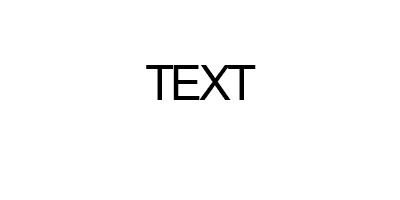
<style>
.page{position:relative;width:400px;height:200px;background:#ffffff}
.page>*{position:absolute;margin:0}
.t1{font:48px "ArialMT";letter-spacing:-0.08em;color:#000000}
</style>
<div class="page">
<p class="t1" style="left:146px;top:65px;width:110px;height:35px">TEXT</p>
</div>
